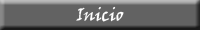
<style>
.page{position:relative;width:200px;height:30px;background:#626262}
.page>*{position:absolute;margin:0}
.t1{font:18px "VinerHandITC";color:#ffffff}
</style>
<div class="page">
<p class="t1" style="left:76px;top:6px;width:48px;height:16px">Inicio</p>
</div>
